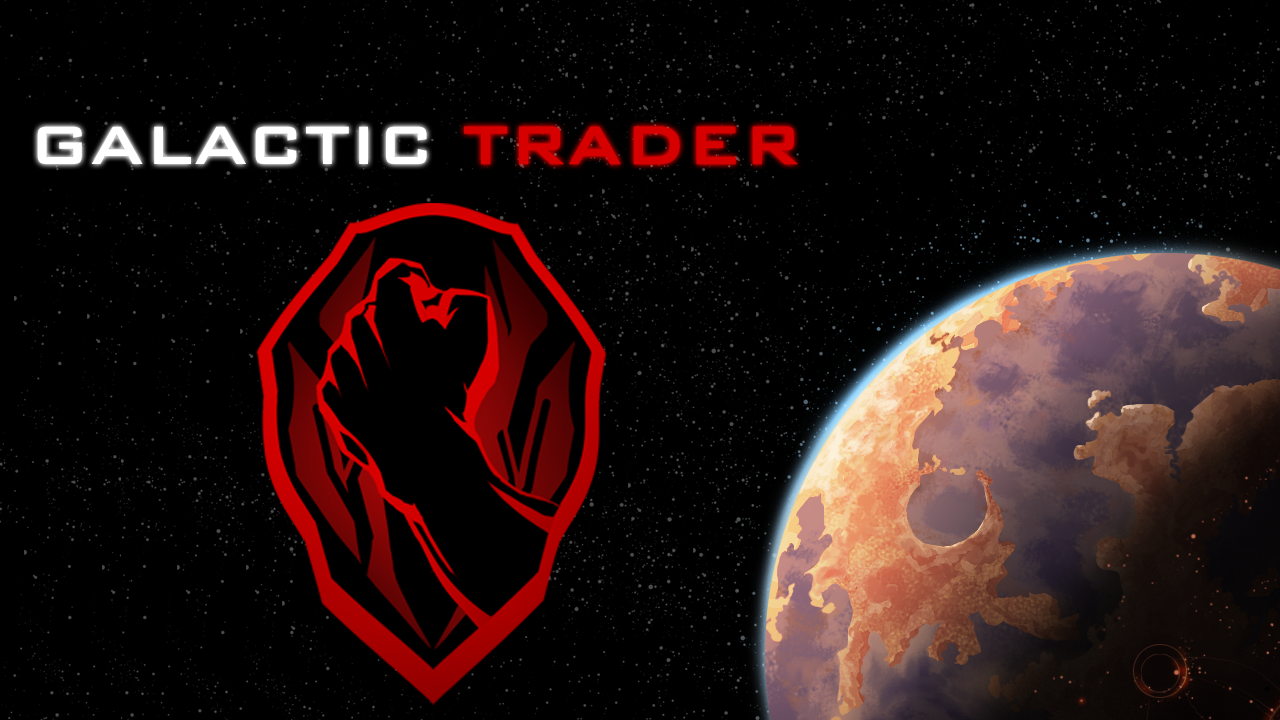
<style>
.page{position:relative;width:1280px;height:720px;background:#000000}
.page>*{position:absolute;margin:0}
.t1{font:72px "BankGothicBT-Medium";color:#ffffff}
.t2{font:72px "BankGothicBT-Medium";color:#d60000;font-weight:bold}
</style>
<div class="page">
<p class="t1" style="left:37px;top:126px;width:390px;height:38px">GALACTIC</p>
<p class="t2" style="left:464px;top:126px;width:334px;height:39px">TRADER</p>
</div>
